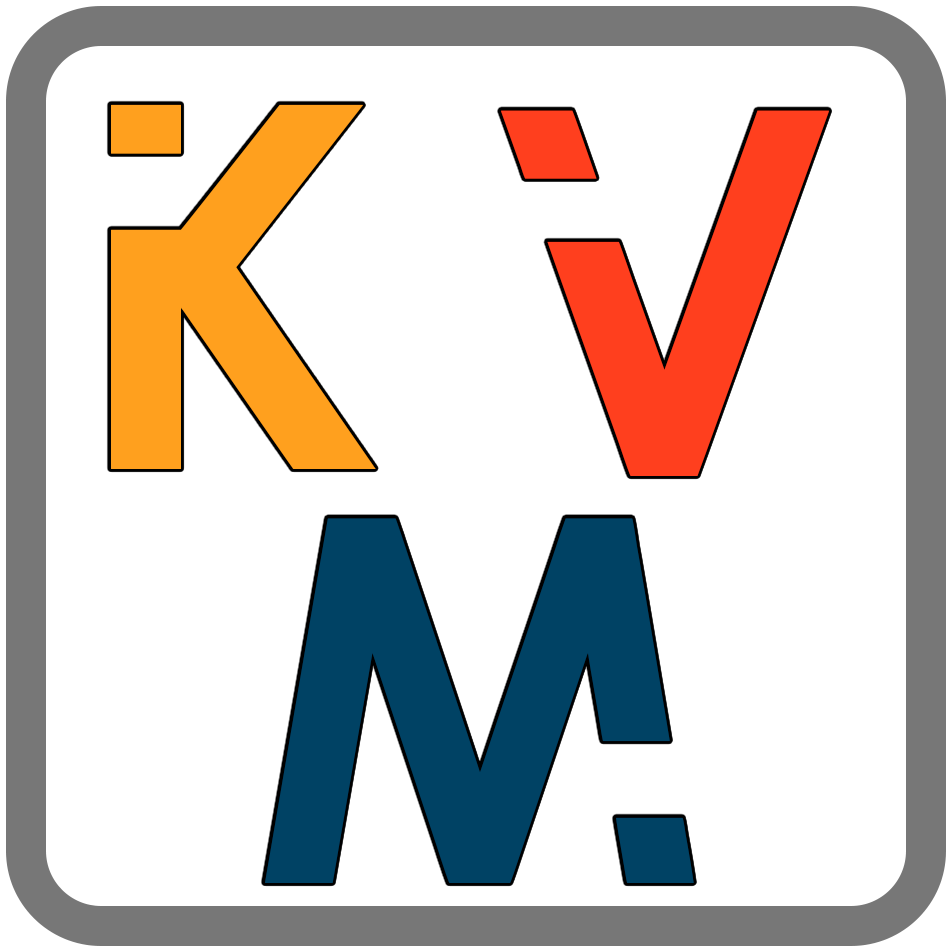
<style>
.page{position:relative;width:950px;height:950px;background:#ffffff}
.page>*{position:absolute;margin:0}
.t1{font:520.8px "ProcrastinatingPixie";color:#ffa01e}
.t2{font:520.8px "ProcrastinatingPixie";color:#ff3f1e}
.t3{font:520.8px "ProcrastinatingPixie";color:#004264}
</style>
<div class="page">
<p class="t1" style="left:111px;top:104px;width:265px;height:365px">K</p>
<p class="t2" style="left:501px;top:110px;width:328px;height:366px">V</p>
<p class="t3" style="left:265px;top:518px;width:429px;height:365px">M</p>
</div>
